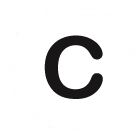
<style>
.page{position:relative;width:140px;height:138px;background:#ffffff}
.page>*{position:absolute;margin:0}
.t1{font:85.8px "ArialRoundedMTBold";color:#181616;scale:1.06 1}
</style>
<div class="page">
<p class="t1" style="left:44px;top:35px;width:59px;height:64px">C</p>
</div>
